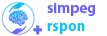
<style>
.page{position:relative;width:107px;height:36px;background:#ffffff}
.page>*{position:absolute;margin:0}
.t1{font:15px "MyriadPro-Bold";color:#6c5ffc}
.t2{font:15px "MyriadPro-Bold";color:#05c3fb}
</style>
<div class="page">
<p class="t1" style="left:47px;top:2px;width:48px;height:32px">simpeg<br><span class="t2">rspon</span></p>
</div>
